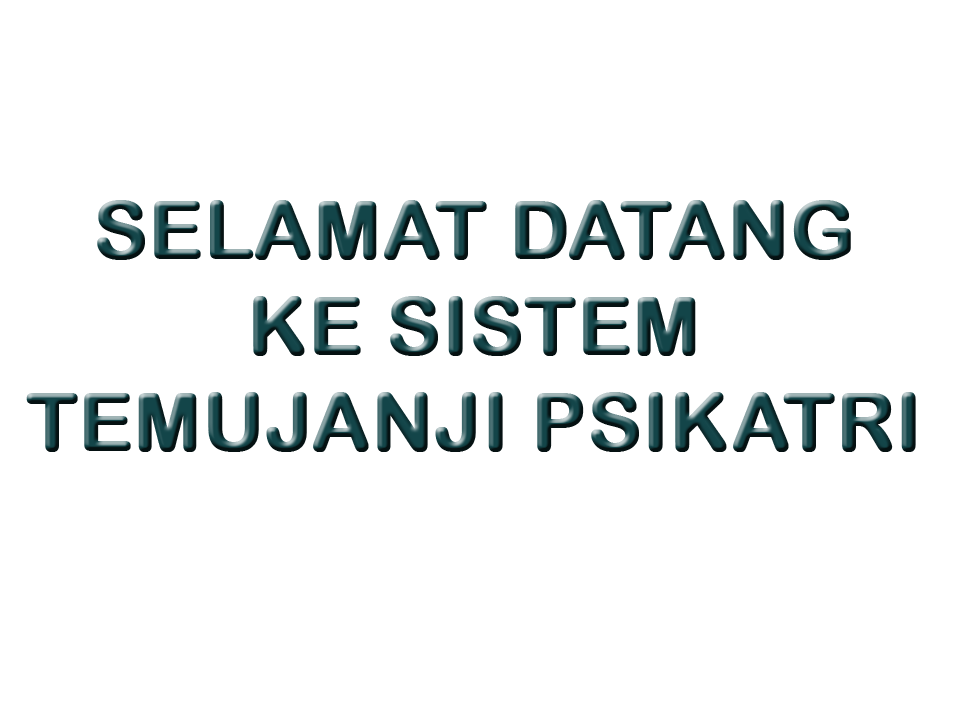
<style>
.page{position:relative;width:960px;height:720px;background:#ffffff}
.page>*{position:absolute;margin:0}
.t1{font:80px "ArialRoundedMTBold";font-weight:bold}
</style>
<div class="page">
<p class="t1" style="left:26px;top:200px;width:890px;height:252px;text-align:center">SELAMAT DATANG<br>KE SISTEM<br>TEMUJANJI PSIKATRI</p>
</div>
